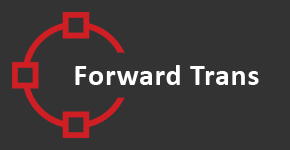
<style>
.page{position:relative;width:290px;height:150px;background:#333333}
.page>*{position:absolute;margin:0}
.t1{font:30px "Calibri-Bold";letter-spacing:0.025em;color:#ffffff}
</style>
<div class="page">
<p class="t1" style="left:75px;top:65px;width:184px;height:20px">Forward Trans</p>
</div>
